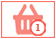
<style>
.page{position:relative;width:56px;height:39px;background:#ffffff}
.page>*{position:absolute;margin:0}
.t1{font:8.8px "TimesNewRomanPS-BoldMT";color:#f44336}
</style>
<div class="page">
<p class="t1" style="left:36px;top:24px;width:4px;height:7px">1</p>
</div>
